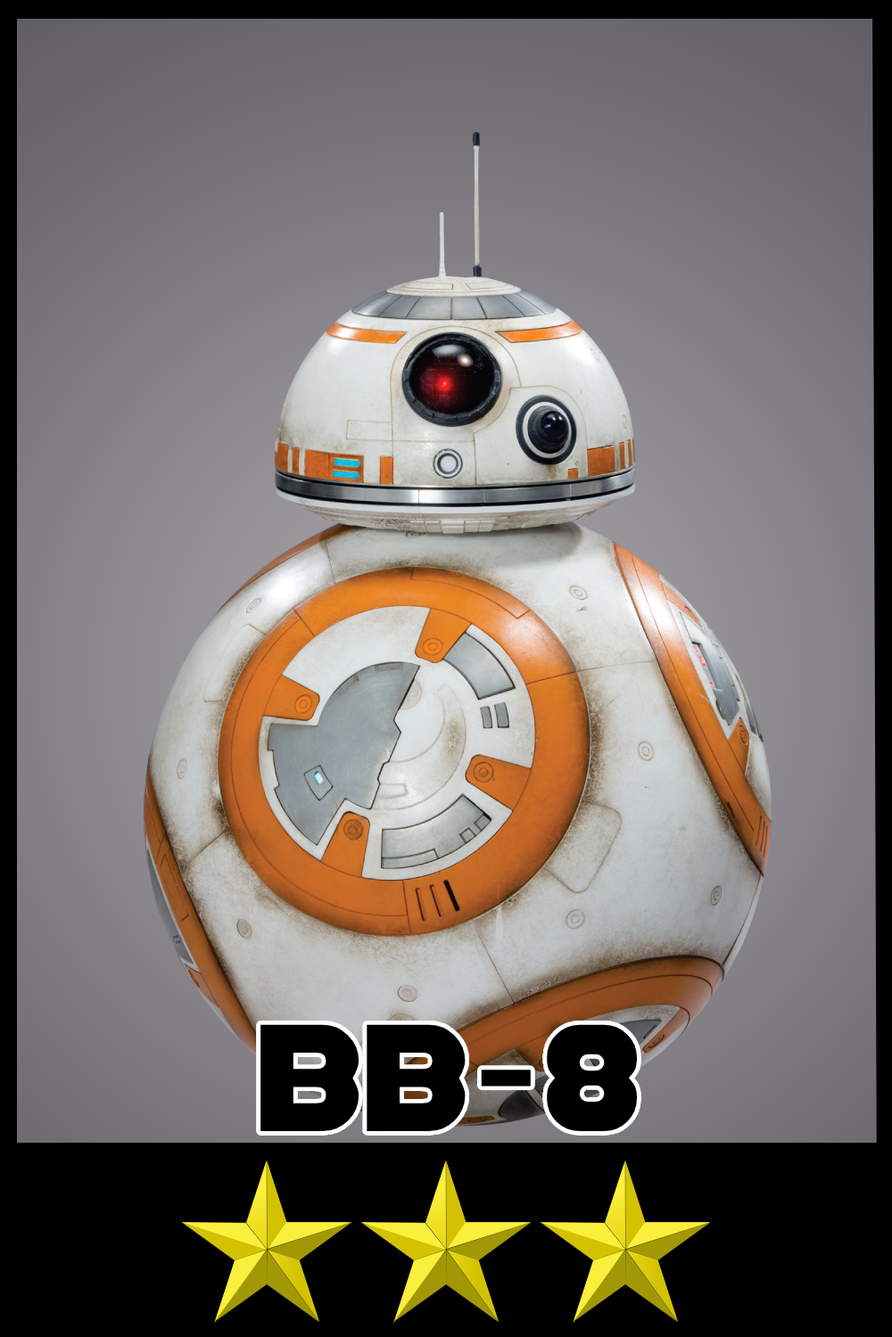
<style>
.page{position:relative;width:892px;height:1337px}
.page>*{position:absolute;margin:0}
.t1{font:163.5px "DistantGalaxy";color:#000000}
</style>
<div class="page">
<p class="t1" style="left:260px;top:1024px;width:377px;height:107px">bb-8</p>
</div>
